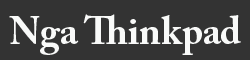
<style>
.page{position:relative;width:250px;height:60px;background:#333333}
.page>*{position:absolute;margin:0}
.t1{font:38.9px "ACaslonPro-Bold";color:#f9faf9}
</style>
<div class="page">
<p class="t1" style="left:9px;top:14px;width:232px;height:41px">Nga Thinkpad</p>
</div>
